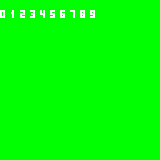
<style>
.page{position:relative;width:160px;height:160px;background:#00ff00}
.page>*{position:absolute;margin:0}
.t1{font:12px "PixelMillennium";color:#ffffff;font-variant:small-caps}
</style>
<div class="page">
<p class="t1" style="left:0px;top:10px;width:5px;height:8px">0</p>
<p class="t1" style="left:11px;top:10px;width:3px;height:8px">1</p>
<p class="t1" style="left:20px;top:10px;width:5px;height:8px">2</p>
<p class="t1" style="left:30px;top:10px;width:5px;height:8px">3</p>
<p class="t1" style="left:40px;top:10px;width:5px;height:8px">4</p>
<p class="t1" style="left:50px;top:10px;width:5px;height:8px">5</p>
<p class="t1" style="left:60px;top:10px;width:5px;height:8px">6</p>
<p class="t1" style="left:70px;top:10px;width:5px;height:8px">7</p>
<p class="t1" style="left:80px;top:10px;width:5px;height:8px">8</p>
<p class="t1" style="left:90px;top:10px;width:5px;height:8px">9</p>
</div>
